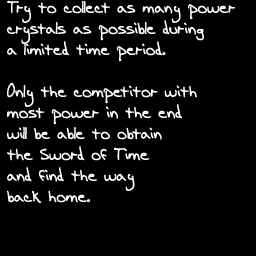
<style>
.page{position:relative;width:256px;height:256px;background:#000000}
.page>*{position:absolute;margin:0}
.t1{font:18px/21px "AEnigmaScrawl4BRK";color:#ffffff}
</style>
<div class="page">
<p class="t1" style="left:7px;top:0px;width:228px;height:203px">Try to collect as many power<br>crystals as possible during<br>a limited time period.<br><br>Only the competitor with<br>most power in the end<br>will be able to obtain<br>the Sword of Time<br>and find the way<br>back home.</p>
</div>
